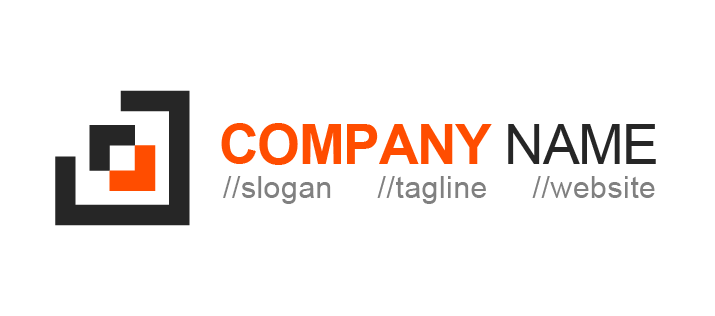
<style>
.page{position:relative;width:715px;height:316px;background:#ffffff}
.page>*{position:absolute;margin:0}
.t1{font:55px "Arial-BoldMT";letter-spacing:-0.025em;color:#ff4d00}
.t2{font:55px "ArialMT";letter-spacing:-0.025em;color:#262626}
.t3{font:30px "ArialMT";letter-spacing:0.02em;color:#808080}
</style>
<div class="page">
<p class="t1" style="left:221px;top:123px;width:435px;height:42px">COMPANY <span class="t2">NAME</span></p>
<p class="t3" style="left:223px;top:176px;width:432px;height:28px">//slogan     //tagline     //website</p>
</div>
